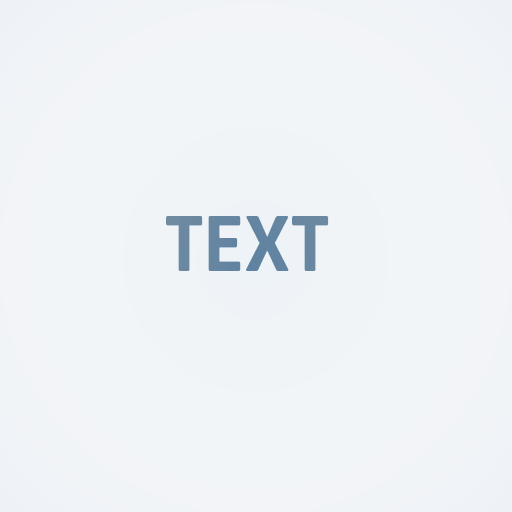
<style>
.page{position:relative;width:512px;height:512px;background:#f2f5f7}
.page>*{position:absolute;margin:0}
.t1{font:86px "Rajdhani-Bold";color:#6686a1;text-transform:uppercase}
</style>
<div class="page">
<p class="t1" style="left:166px;top:216px;width:163px;height:55px">text</p>
</div>
